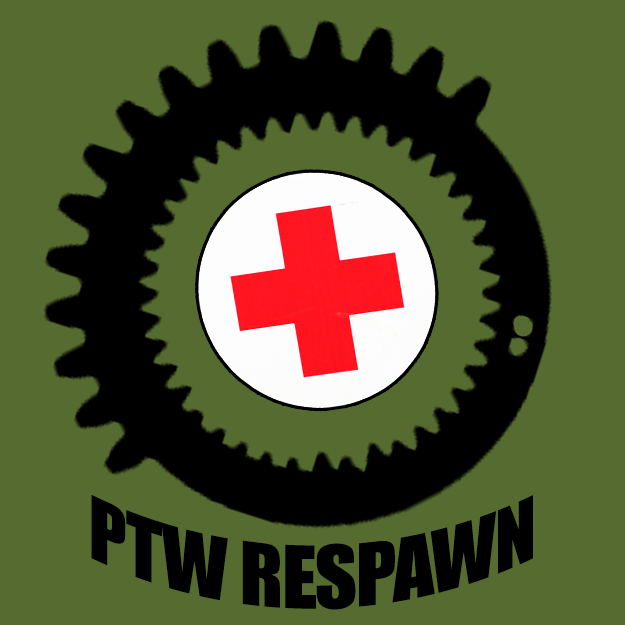
<style>
.page{position:relative;width:625px;height:625px;background:#556b2f}
.page>*{position:absolute;margin:0}
.t1{font:80.5px "Impact";letter-spacing:-0.02em;color:#000000}
</style>
<div class="page">
<p class="t1" style="left:91px;top:495px;width:442px;height:115px">PTW RESPAWN</p>
</div>
